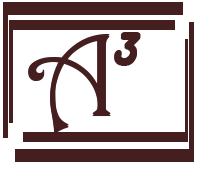
<style>
.page{position:relative;width:203px;height:169px;background:#ffffff}
.page>*{position:absolute;margin:0}
.t1{font:117.1px "Harrington";color:#451e1f;scale:1.05 1}
.t2{font:53px "HarlowSolid";color:#451e1f;scale:1.05 1}
</style>
<div class="page">
<p class="t1" style="left:28px;top:36px;width:83px;height:98px">A</p>
<p class="t2" style="left:114px;top:34px;width:27px;height:32px">3</p>
</div>
